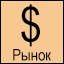
<style>
.page{position:relative;width:64px;height:64px;background:#f8c893}
.page>*{position:absolute;margin:0}
.t1{font:48px "ArialNarrow";color:#000000}
.t2{font:16px "ArialNarrow";color:#000000}
</style>
<div class="page">
<p class="t1" style="left:21px;top:4px;width:19px;height:43px">$</p>
<p class="t2" style="left:13px;top:49px;width:38px;height:12px">Рынок</p>
</div>
